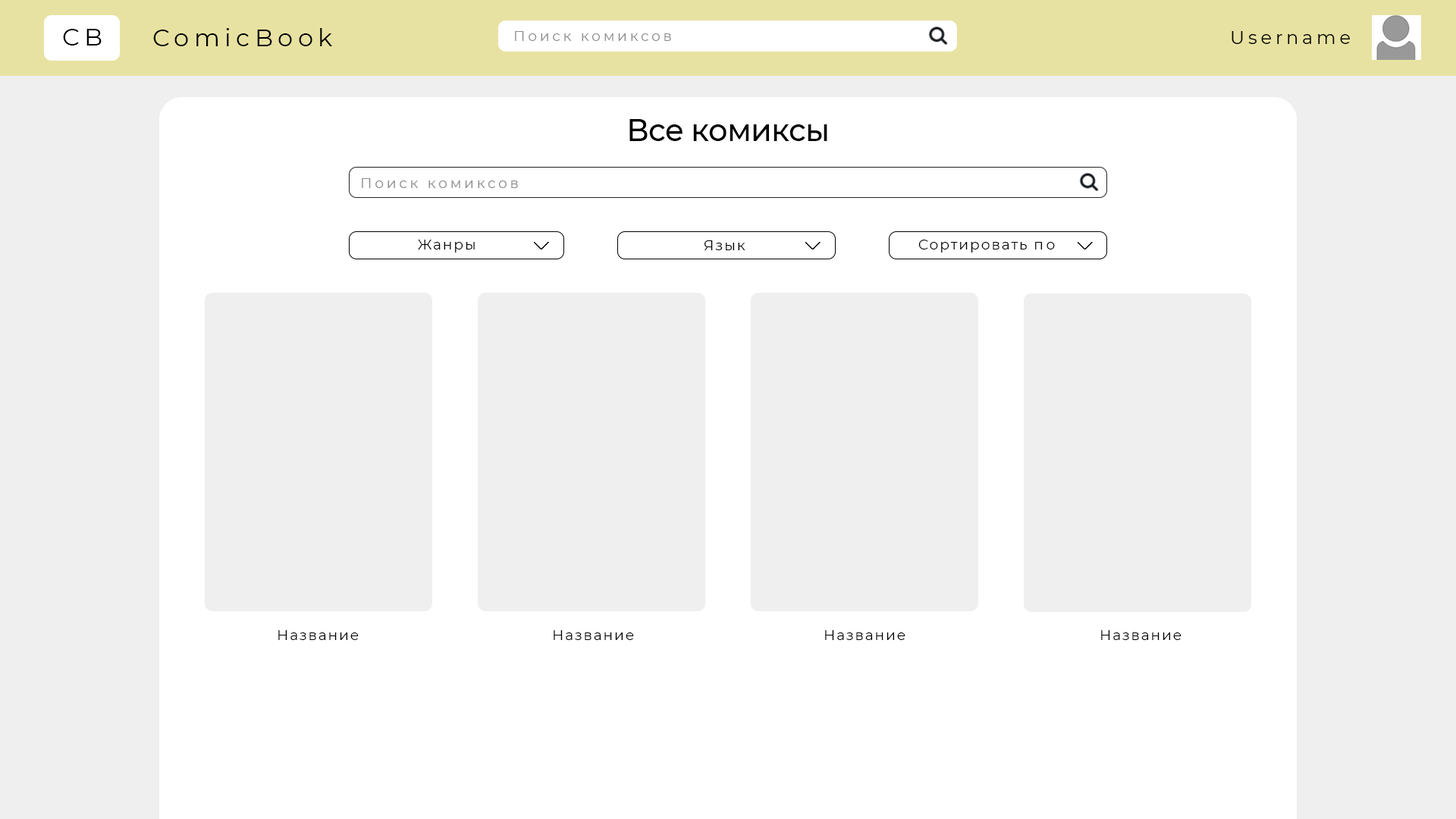
<style>
.page{position:relative;width:1456px;height:819px;background:#efefef}
.page>*{position:absolute;margin:0}
.t1{font:24.3px "Montserrat-Regular";letter-spacing:0.2em;color:#000000}
.t2{font:14.2px "Montserrat-Regular";letter-spacing:0.2em;color:#8d8d8d}
.t3{font:18.2px "Montserrat-Regular";letter-spacing:0.2em;color:#000000}
.t4{font:30.3px "Montserrat-Medium";letter-spacing:-0.016em;color:#000000}
.t5{font:14.2px "Montserrat-Regular";letter-spacing:0.2em;color:#8c8c8c}
.t6{font:14.2px "Montserrat-Regular";letter-spacing:0.1em;color:#000000}
.t7{font:14.2px "Montserrat-Regular";letter-spacing:0.2em;color:#000000}
</style>
<div class="page">
<p class="t1" style="left:63px;top:29px;width:39px;height:16px">CB</p>
<p class="t1" style="left:153px;top:28px;width:179px;height:18px">ComicBook</p>
<p class="t2" style="left:515px;top:31px;width:156px;height:10px">Поиск комиксов</p>
<p class="t3" style="left:1232px;top:31px;width:118px;height:13px">Username</p>
<p class="t4" style="left:629px;top:119px;width:198px;height:22px">Все комиксы</p>
<p class="t5" style="left:362px;top:178px;width:156px;height:10px">Поиск комиксов</p>
<p class="t6" style="left:418px;top:240px;width:57px;height:13px">Жанры</p>
<p class="t6" style="left:704px;top:240px;width:41px;height:10px">Язык</p>
<p class="t6" style="left:918px;top:240px;width:137px;height:13px">Сортировать <span class="t7">по</span></p>
<p class="t6" style="left:278px;top:630px;width:81px;height:10px">Название</p>
<p class="t6" style="left:554px;top:630px;width:80px;height:10px">Название</p>
<p class="t6" style="left:825px;top:630px;width:80px;height:10px">Название</p>
<p class="t6" style="left:1101px;top:630px;width:80px;height:10px">Название</p>
</div>
